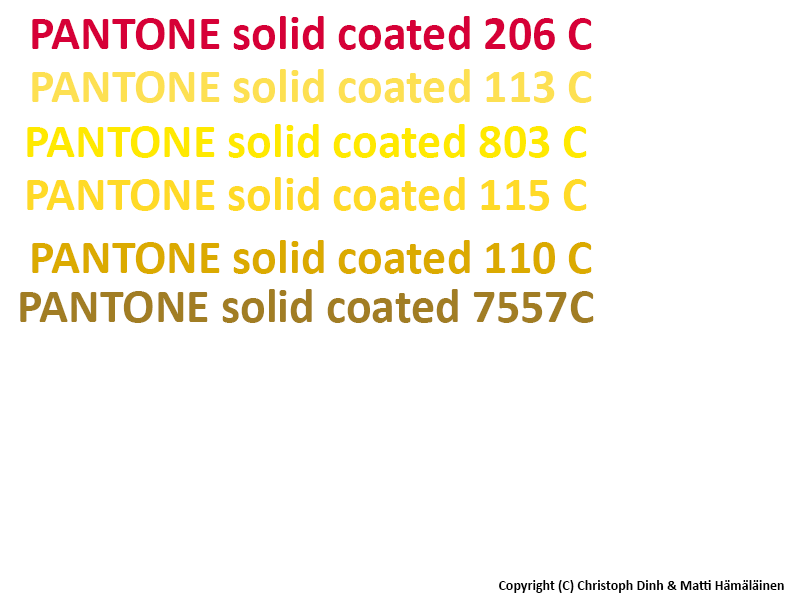
<style>
.page{position:relative;width:800px;height:600px;background:#ffffff}
.page>*{position:absolute;margin:0}
.t1{font:48px "Calibri-Bold";color:#d60037}
.t2{font:48px "Calibri-Bold";color:#fde052}
.t3{font:48px "Calibri-Bold";color:#ffe900}
.t4{font:48px "Calibri-Bold";color:#ffda27}
.t5{font:48px "Calibri-Bold";color:#dbaa00}
.t6{font:48px "Calibri-Bold";color:#a17d24}
.t7{font:14px "Calibri-Bold";color:#000000}
</style>
<div class="page">
<p class="t1" style="left:32px;top:16px;width:560px;height:34px">PANTONE solid coated 206 C</p>
<p class="t2" style="left:32px;top:69px;width:560px;height:34px">PANTONE solid coated 113 C</p>
<p class="t3" style="left:27px;top:124px;width:560px;height:34px">PANTONE solid coated 803 C</p>
<p class="t4" style="left:27px;top:177px;width:560px;height:34px">PANTONE solid coated 115 C</p>
<p class="t5" style="left:32px;top:240px;width:560px;height:34px">PANTONE solid coated 110 C</p>
<p class="t6" style="left:20px;top:289px;width:574px;height:34px">PANTONE solid coated 7557C</p>
<p class="t7" style="left:499px;top:580px;width:285px;height:13px">Copyright (C) Christoph Dinh &amp; Matti Hämäläinen</p>
</div>
